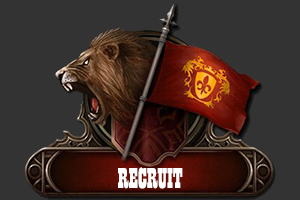
<style>
.page{position:relative;width:300px;height:200px;background:#333333}
.page>*{position:absolute;margin:0}
.t1{font:30px "Playbill";color:#ffffff}
</style>
<div class="page">
<p class="t1" style="left:118px;top:167px;width:65px;height:22px">RECRUIT</p>
</div>
